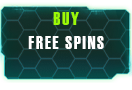
<style>
.page{position:relative;width:132px;height:90px}
.page>*{position:absolute;margin:0}
.t1{font:18px/24px "Haettenschweiler";letter-spacing:0.1em;color:#ffffff}
.t2{font:18px/24px "Haettenschweiler";letter-spacing:0.1em;color:#9bfa06}
</style>
<div class="page">
<p class="t1" style="left:28px;top:12px;width:76px;height:37px;text-align:center"><span class="t2">BUY<br></span>FREE SPINS</p>
</div>
